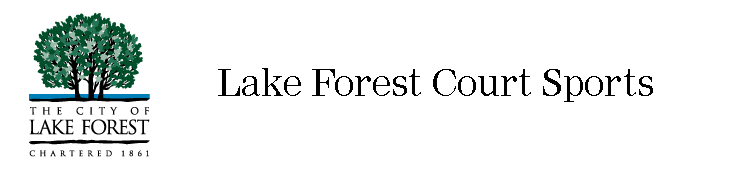
<style>
.page{position:relative;width:730px;height:181px;background:#ffffff}
.page>*{position:absolute;margin:0}
.t1{font:36px "Nimrod";color:#000000}
</style>
<div class="page">
<p class="t1" style="left:218px;top:68px;width:435px;height:34px">Lake Forest Court Sports</p>
</div>
